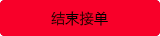
<style>
.page{position:relative;width:160px;height:36px;background:#f80029}
.page>*{position:absolute;margin:0}
.t1{font:15px "STXihei";letter-spacing:-0.045em;color:#000000}
</style>
<div class="page">
<p class="t1" style="left:51px;top:11px;width:57px;height:15px">结束接单</p>
</div>
